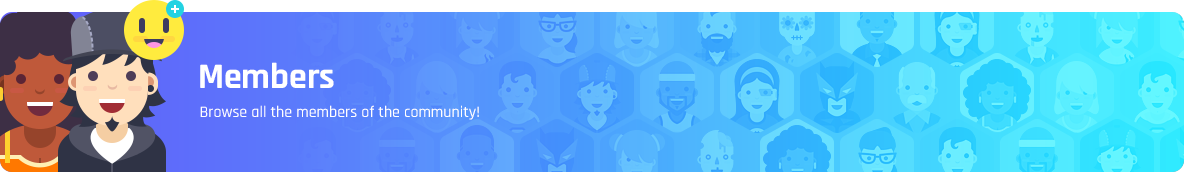
<style>
.page{position:relative;width:1184px;height:172px}
.page>*{position:absolute;margin:0}
.t1{font:36px "Rajdhani-Bold";color:#ffffff}
.t2{font:16px "Rajdhani-Medium";color:#ffffff}
</style>
<div class="page">
<p class="t1" style="left:200px;top:62px;width:134px;height:26px">Members</p>
<p class="t2" style="left:200px;top:105px;width:279px;height:15px">Browse all the members of the community!</p>
</div>
